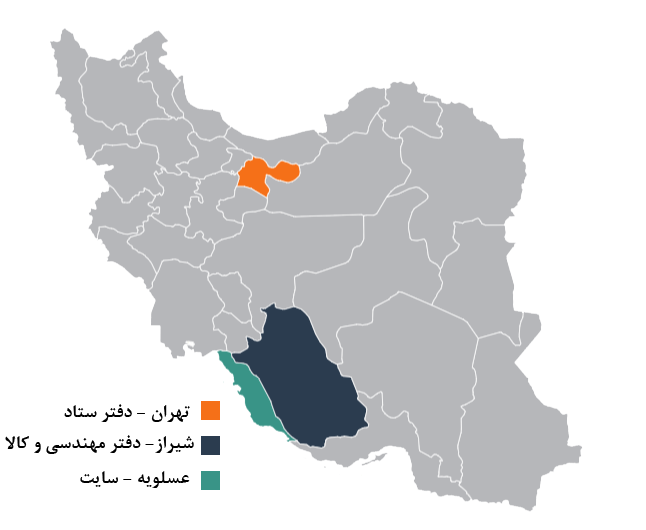
<style>
.page{position:relative;width:646px;height:530px;background:#ffffff}
.page>*{position:absolute;margin:0}
.t1{font:20px "BNazaninBold";color:#000000}
</style>
<div class="page">
<p class="t1" style="left:64px;top:404px;width:126px;height:18px">تهران - دفتر ستاد پروژه</p>
<p class="t1" style="left:5px;top:435px;width:189px;height:19px">شیراز- دفتر مهندسی و کالا</p>
<p class="t1" style="left:80px;top:471px;width:110px;height:17px">عسلویه - سایت</p>
</div>
